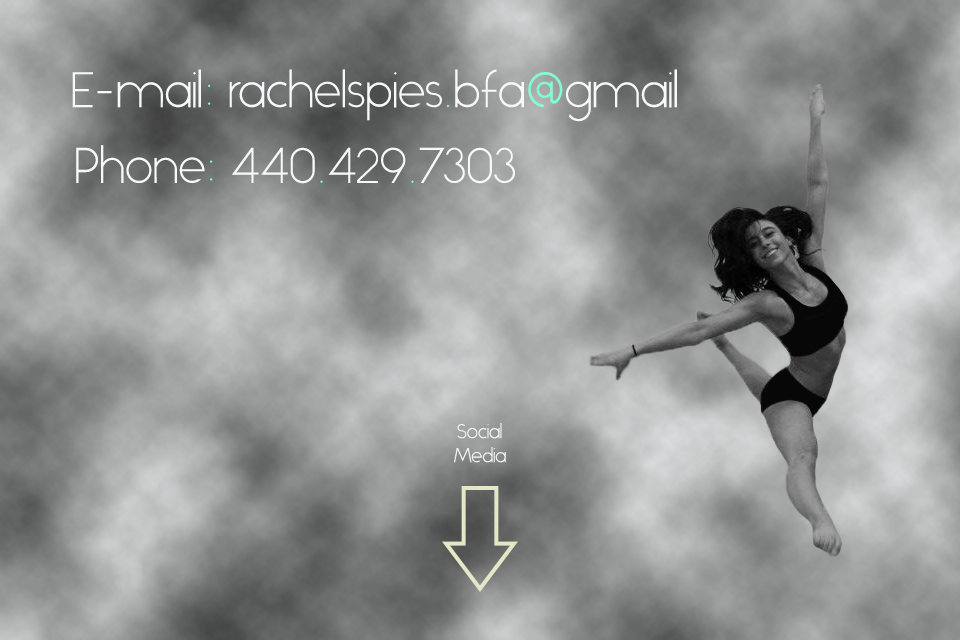
<style>
.page{position:relative;width:960px;height:640px}
.page>*{position:absolute;margin:0}
.t1{font:50px "Alcubierre";color:#f6f9f9}
.t2{font:50px "Alcubierre";color:#7fffd4}
.t3{font:20px "Alcubierre";color:#f6f9f9}
</style>
<div class="page">
<p class="t1" style="left:72px;top:69px;width:605px;height:53px">E-mail<span class="t2">:</span> rachelspies<span class="t2">.</span>bfa<span class="t2">@</span>gmail</p>
<p class="t1" style="left:76px;top:145px;width:439px;height:39px">Phone<span class="t2">:</span> 440<span class="t2">.</span>429<span class="t2">.</span>7303</p>
<p class="t3" style="left:454px;top:423px;width:52px;height:40px;text-align:center">Social<br>Media</p>
</div>
